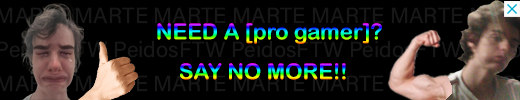
<style>
.page{position:relative;width:520px;height:100px;background:#000000}
.page>*{position:absolute;margin:0}
.t1{font:22px "ArialRoundedMTBold"}
</style>
<div class="page">
<p class="t1" style="left:157px;top:23px;width:225px;height:21px">NEED A [pro gamer]?</p>
<p class="t1" style="left:180px;top:63px;width:166px;height:17px">SAY NO MORE!!</p>
</div>
